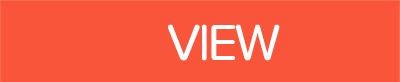
<style>
.page{position:relative;width:400px;height:82px;background:#f8553a}
.page>*{position:absolute;margin:0}
.t1{font:52.2px "ProximaNovaSoft-Regular";letter-spacing:-0.08em;color:#ffffff;font-weight:bold}
</style>
<div class="page">
<p class="t1" style="left:168px;top:24px;width:112px;height:37px">VIEW</p>
</div>
